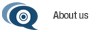
<style>
.page{position:relative;width:105px;height:32px;background:#ffffff}
.page>*{position:absolute;margin:0}
.t1{font:10.4px "HelveticaNeue-CondensedBold";letter-spacing:-0.025em;color:#4e4e4e}
</style>
<div class="page">
<p class="t1" style="left:53px;top:11px;width:36px;height:8px">About us</p>
</div>
